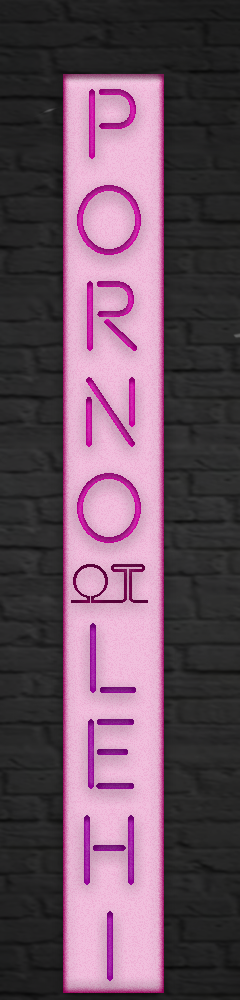
<style>
.page{position:relative;width:240px;height:1000px}
.page>*{position:absolute;margin:0}
.t1{font:100px/24px "Beon-Regular"}
.t2{font:100px/24px "MinionPro-Regular"}
.t3{font:48px "AA-Neon";color:#640241}
</style>
<div class="page">
<p class="t1" style="left:77px;top:89px;width:64px;height:454px;text-align:center"><span class="t2"><br></span>P<br><br><br><br>O<br><br><br><br>R<br><br><br><br>N<br><br><br><br>O</p>
<p class="t3" style="left:71px;top:564px;width:77px;height:39px">ot</p>
<p class="t1" style="left:84px;top:623px;width:52px;height:358px;text-align:center">L<br><br><br><br>e<br><br><br><br>h<br><br><br><br>i</p>
</div>
